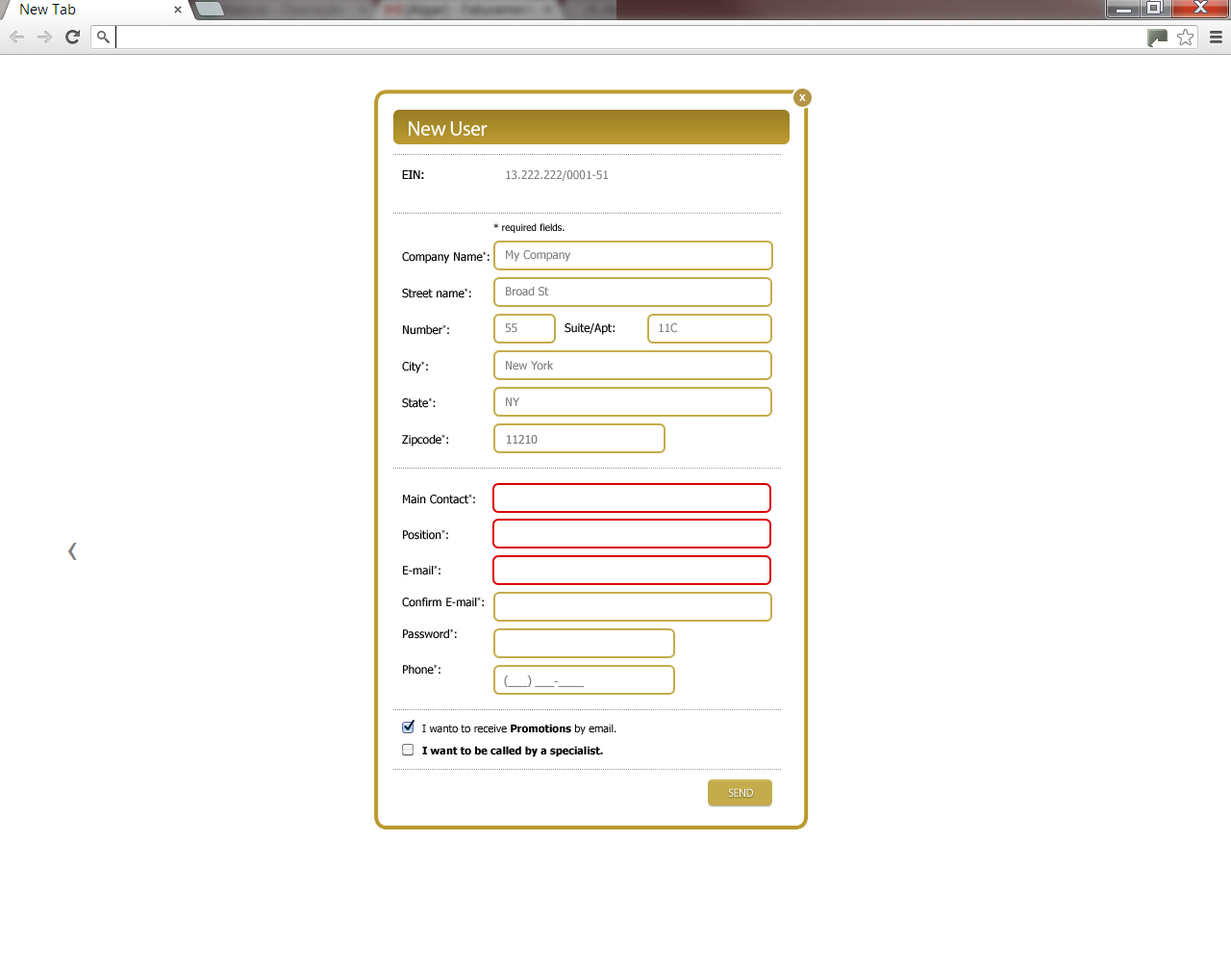
<style>
.page{position:relative;width:1231px;height:969px;background:#ffffff}
.page>*{position:absolute;margin:0}
.t1{font:21.2px "MyriadPro-Regular";letter-spacing:-0.025em;color:#ffffff}
.t2{font:11.5px "Tahoma";color:#000000}
.t3{font:11.5px "Tahoma";color:#7f7f7f}
.t4{font:9.6px "Tahoma";color:#000000}
.t5{font:11.5px/36.5px "Tahoma";color:#000000}
.t6{font:11.5px/35.6px "Tahoma";color:#000000}
.t7{font:11.5px/31.7px "Tahoma";color:#000000}
.t8{font:10.6px "Tahoma";color:#000000}
.t9{font:10.6px "Tahoma-Bold";color:#000000}
.t10{font:11.5px "MyriadPro-Regular";letter-spacing:-0.04em;color:#ffffff;text-transform:uppercase}
</style>
<div class="page">
<p class="t1" style="left:409px;top:121px;width:79px;height:15px">New User</p>
<p class="t2" style="left:402px;top:170px;width:22px;height:9px">EIN:</p>
<p class="t3" style="left:506px;top:170px;width:102px;height:11px">13.222.222/0001-51</p>
<p class="t4" style="left:493px;top:223px;width:72px;height:10px">* required fields.</p>
<p class="t5" style="left:402px;top:251px;width:88px;height:195px">Company Name<span class="t6">*</span>:<br>Street name<span class="t6">*</span>:<br>Number<span class="t6">*</span>:<br>City<span class="t6">*</span>:<br>State<span class="t6">*</span>:<br>Zipcode<span class="t6">*</span>:</p>
<p class="t3" style="left:506px;top:250px;width:65px;height:12px">My Company</p>
<p class="t3" style="left:506px;top:287px;width:43px;height:9px">Broad St</p>
<p class="t3" style="left:505px;top:323px;width:12px;height:10px">55</p>
<p class="t2" style="left:565px;top:323px;width:50px;height:12px">Suite/Apt:</p>
<p class="t3" style="left:659px;top:323px;width:18px;height:10px">11C</p>
<p class="t3" style="left:506px;top:361px;width:48px;height:9px">New York</p>
<p class="t3" style="left:506px;top:397px;width:14px;height:9px">NY</p>
<p class="t3" style="left:507px;top:435px;width:31px;height:8px">11210</p>
<p class="t6" style="left:402px;top:493px;width:82px;height:181px">Main Contact*:<br>Position*:<br>E-mail*:<br><span class="t7">Confirm E-mail</span><span class="t2">*:<br></span><span class="t7">Password*:<br></span>Phone*:</p>
<p class="t3" style="left:504px;top:675px;width:80px;height:12px">(___) ___-____</p>
<p class="t8" style="left:422px;top:723px;width:195px;height:12px">I wanto to receive <span class="t9">Promotions</span> by email.</p>
<p class="t9" style="left:422px;top:745px;width:181px;height:12px">I want to be called by a specialist.</p>
<p class="t10" style="left:728px;top:788px;width:25px;height:8px">SEND</p>
</div>
